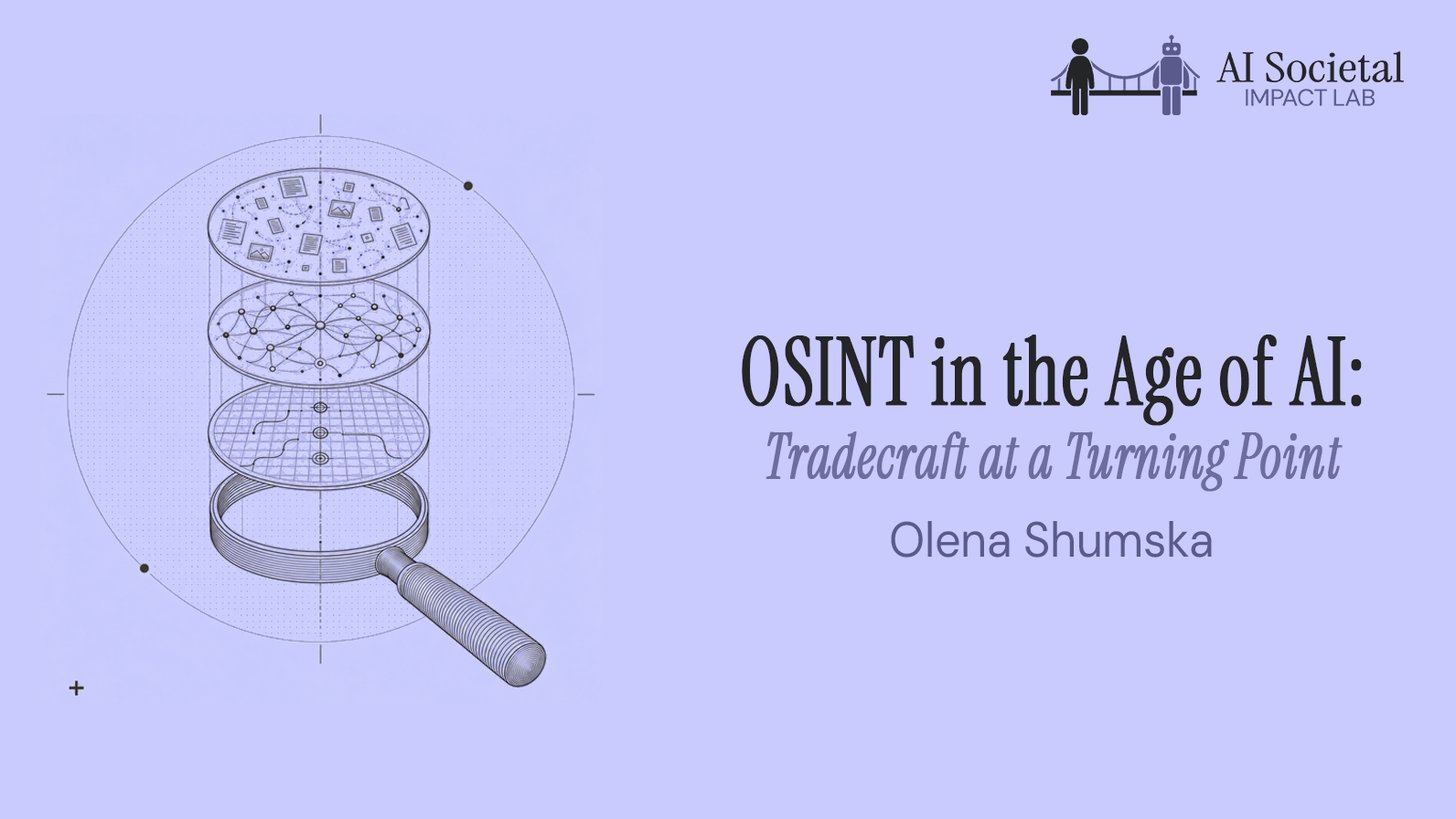
<style>
.page{position:relative;width:1456px;height:819px;background:#c9cafe}
.page>*{position:absolute;margin:0}
.t1{font:62.1px/73.4px "InstrumentSerif-Italic";letter-spacing:0.005em;color:#6d6d9f;font-weight:bold;scale:0.81 1}
.t2{font:92.9px/82.5px "InstrumentSerif-Regular";letter-spacing:0.005em;color:#232526;font-weight:bold;scale:0.81 1}
.t3{font:92.9px/73.4px "InstrumentSerif-Regular";letter-spacing:0.005em;color:#232526;font-weight:bold;scale:0.81 1}
.t4{font:49.4px "DMSans9pt-Regular";letter-spacing:-0.005em;color:#5a5a8c;scale:0.93 1}
</style>
<div class="page">
<p class="t1" style="left:742px;top:335px;width:619px;height:157px;text-align:center"><span class="t2"><br></span><span class="t3">OSINT in the Age of AI:<br></span>Tradecraft at a Turning Point</p>
<p class="t4" style="left:891px;top:521px;width:320px;height:37px">Olena Shumska</p>
</div>
